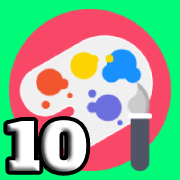
<style>
.page{position:relative;width:180px;height:180px;background:#00fb79}
.page>*{position:absolute;margin:0}
.t1{font:64px "AlfaSlabOne-Regular";color:#ffffff}
</style>
<div class="page">
<p class="t1" style="left:7px;top:120px;width:80px;height:52px">10</p>
</div>
